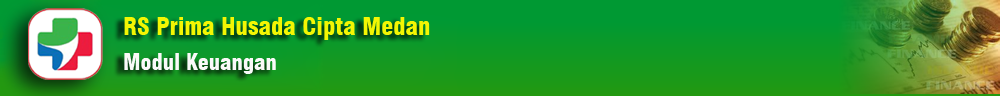
<style>
.page{position:relative;width:1000px;height:96px}
.page>*{position:absolute;margin:0}
.t1{font:24px "Swiss721BT-BlackCondensed";color:#f3f603}
.t2{font:22px "Swiss721BT-BlackCondensed";color:#fafaf9}
</style>
<div class="page">
<p class="t1" style="left:124px;top:17px;width:306px;height:23px">RS Prima Husada Cipta Medan</p>
<p class="t2" style="left:124px;top:53px;width:152px;height:21px">Modul Keuangan</p>
</div>
